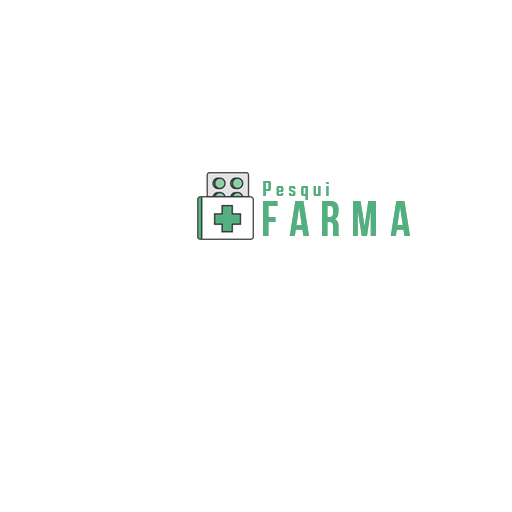
<style>
.page{position:relative;width:512px;height:512px;background:#ffffff}
.page>*{position:absolute;margin:0}
.t1{font:20px "AgencyFB-Bold";letter-spacing:0.22em;color:#53af80}
.t2{font:50px "BebasNeue";letter-spacing:0.22em;color:#53af80}
</style>
<div class="page">
<p class="t1" style="left:263px;top:181px;width:66px;height:19px">Pesqui</p>
<p class="t1" style="left:263px;top:181px;width:66px;height:19px">Pesqui</p>
<p class="t2" style="left:263px;top:201px;width:147px;height:35px">Farma</p>
<p class="t2" style="left:263px;top:201px;width:147px;height:35px">Farma</p>
</div>
